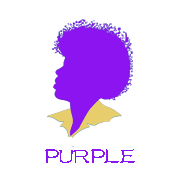
<style>
.page{position:relative;width:180px;height:180px;background:#ffffff}
.page>*{position:absolute;margin:0}
.t1{font:24px "FZSTK--GBK1-0";letter-spacing:-0.06em;color:#8b14f0}
</style>
<div class="page">
<p class="t1" style="left:45px;top:149px;width:90px;height:14px">PURPLE</p>
</div>
